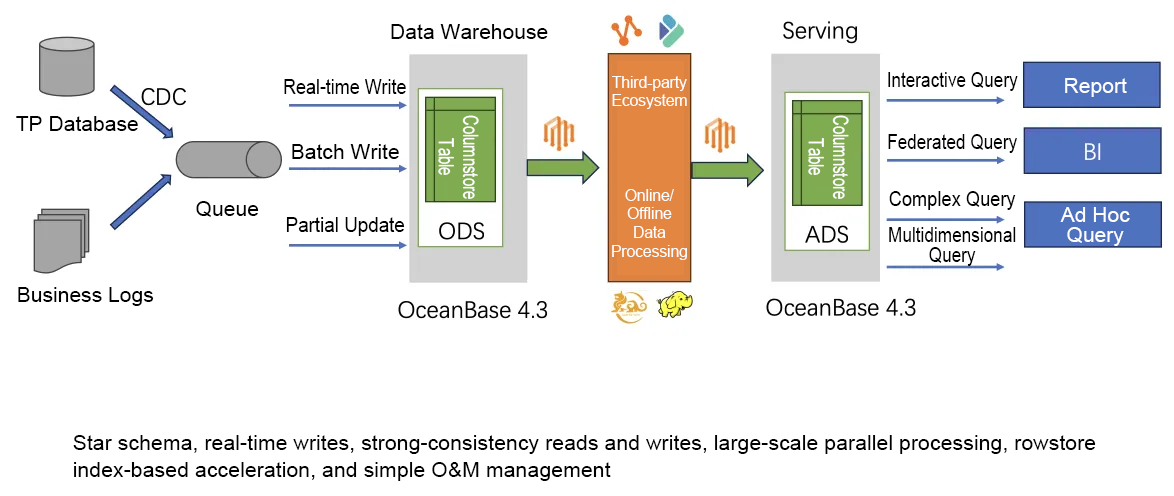
<style>
.page{position:relative;width:1174px;height:496px;background:#ffffff}
.page>*{position:absolute;margin:0}
.t1{font:21.1px "ArialMT";color:#000000}
.t2{font:16.3px/18.6px "ArialMT";color:#fefefe;scale:0.95 1}
.t3{font:21.1px "ArialMT";color:#000000;scale:0.82 1}
.t4{font:21.1px "ArialMT";color:#fefefe}
.t5{font:21.1px "ArialMT";color:#000000;scale:0.85 1}
.t6{font:20.7px/24.5px "ArialMT";color:#ffffff;scale:0.72 1}
.t7{font:16.3px/18.6px "ArialMT";color:#ffffff;scale:0.95 1}
.t8{font:21.1px "ArialMT";color:#000000;scale:0.87 1}
.t9{font:21.1px/20.2px "ArialMT";color:#fefefe}
.t10{font:21.1px "ArialMT";color:#000000;scale:0.89 1}
.t11{font:21.1px/20.3px "ArialMT";color:#000000;scale:0.82 1}
.t12{font:21.4px/27px "ArialMT";color:#000000}
</style>
<div class="page">
<p class="t1" style="left:391px;top:24px;width:157px;height:15px">Data Warehouse</p>
<p class="t2" style="left:612px;top:76px;width:75px;height:33px;text-align:center">Third-party<br>Ecosystem</p>
<p class="t3" style="left:888px;top:72px;width:130px;height:19px">Interactive Query</p>
<p class="t4" style="left:1065px;top:78px;width:62px;height:19px">Report</p>
<p class="t5" style="left:284px;top:79px;width:122px;height:15px">Real-time Write</p>
<p class="t1" style="left:16px;top:116px;width:122px;height:15px">TP Database</p>
<p class="t6" style="left:438px;top:115px;width:41px;height:84px;text-align:center;rotate:90deg">Columnstore<br>Table</p>
<p class="t6" style="left:808px;top:115px;width:41px;height:84px;text-align:center;rotate:90deg">Columnstore<br>Table</p>
<p class="t3" style="left:888px;top:134px;width:129px;height:19px">Federated Query</p>
<p class="t1" style="left:292px;top:144px;width:107px;height:15px">Batch Write</p>
<p class="t7" style="left:612px;top:189px;width:75px;height:71px;text-align:center">Online/<br>Offline<br>Data<br>Processing</p>
<p class="t8" style="left:889px;top:191px;width:127px;height:19px">Complex Query</p>
<p class="t1" style="left:196px;top:201px;width:63px;height:16px">Queue</p>
<p class="t9" style="left:1060px;top:207px;width:70px;height:39px;text-align:center">Ad Hoc<br>Query</p>
<p class="t10" style="left:286px;top:217px;width:119px;height:19px">Partial Update</p>
<p class="t11" style="left:889px;top:227px;width:127px;height:39px;text-align:center">Multidimensional<br>Query</p>
<p class="t1" style="left:18px;top:287px;width:136px;height:19px">Business Logs</p>
<p class="t12" style="left:73px;top:435px;width:1023px;height:46px">Star schema, real-time writes, strong-consistency reads and writes, large-scale parallel processing, rowstore index-based acceleration, and simple O&amp;M management</p>
</div>
